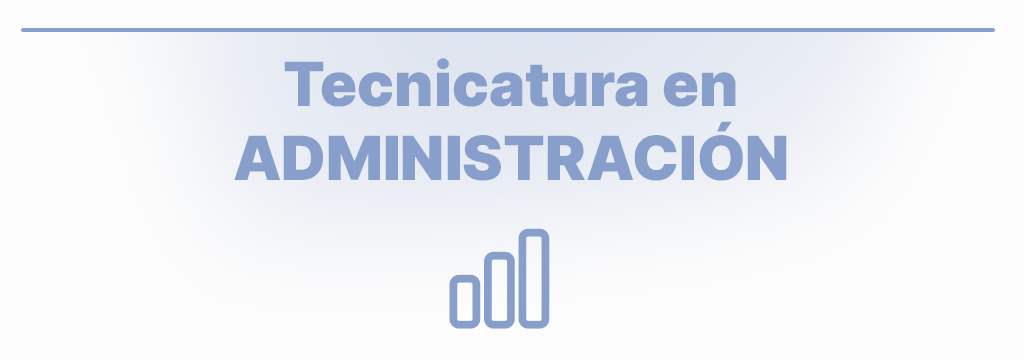
<style>
.page{position:relative;width:1024px;height:360px;background:#fcfcfc}
.page>*{position:absolute;margin:0}
.t1{font:61px "Inter-Black";color:#889fcb}
</style>
<div class="page">
<p class="t1" style="left:234px;top:58px;width:553px;height:123px;text-align:center">Tecnicatura en<br>ADMINISTRACIÓN</p>
</div>
